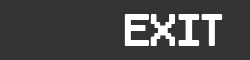
<style>
.page{position:relative;width:250px;height:60px;background:#333333}
.page>*{position:absolute;margin:0}
.t1{font:40px "PixelSplitter-Bold";color:#ffffff}
</style>
<div class="page">
<p class="t1" style="left:124px;top:14px;width:99px;height:32px">Exit</p>
</div>
